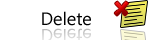
<style>
.page{position:relative;width:150px;height:40px;background:#ffffff}
.page>*{position:absolute;margin:0}
.t1{font:18px "SegoeUI";color:#000000}
</style>
<div class="page">
<p class="t1" style="left:42px;top:11px;width:49px;height:15px">Delete</p>
</div>
